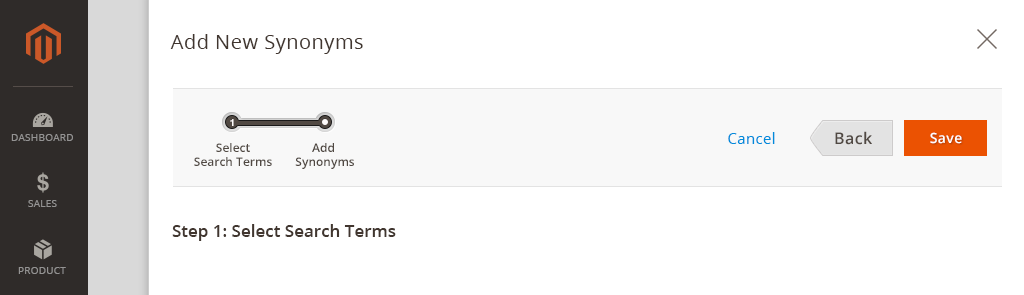
<style>
.page{position:relative;width:1024px;height:295px;background:#ffffff}
.page>*{position:absolute;margin:0}
.t1{font:20px "OpenSans";letter-spacing:0.025em;color:#41362f}
.t2{font:10px "HelveticaNeue-Bold";color:#fefbfb}
.t3{font:10px "OpenSans";letter-spacing:0.025em;color:#949393;text-transform:uppercase}
.t4{font:15px "OpenSans";letter-spacing:0.025em;color:#008bdb}
.t5{font:16px "OpenSans-Semibold";letter-spacing:0.025em;color:#514943}
.t6{font:14px "OpenSans-Semibold";letter-spacing:0.025em;color:#ffffff}
.t7{font:12px/14px "OpenSans-Semibold";color:#514943}
.t8{font:17px "OpenSans-Semibold";color:#41362f}
</style>
<div class="page">
<p class="t1" style="left:170px;top:34px;width:193px;height:20px">Add New Synonyms</p>
<p class="t2" style="left:230px;top:119px;width:4px;height:7px">1</p>
<p class="t3" style="left:11px;top:134px;width:62px;height:7px">Dashboard</p>
<p class="t4" style="left:728px;top:132px;width:47px;height:12px">Cancel</p>
<p class="t5" style="left:835px;top:131px;width:37px;height:14px">Back</p>
<p class="t6" style="left:930px;top:132px;width:32px;height:12px">Save</p>
<p class="t7" style="left:194px;top:143px;width:78px;height:23px;text-align:center">Select<br>Search Terms</p>
<p class="t7" style="left:295px;top:143px;width:59px;height:26px;text-align:center">Add <br>Synonyms</p>
<p class="t3" style="left:28px;top:200px;width:29px;height:7px">Sales</p>
<p class="t8" style="left:172px;top:224px;width:224px;height:17px">Step 1: Select Search Terms</p>
<p class="t3" style="left:18px;top:267px;width:48px;height:7px">Product</p>
</div>
